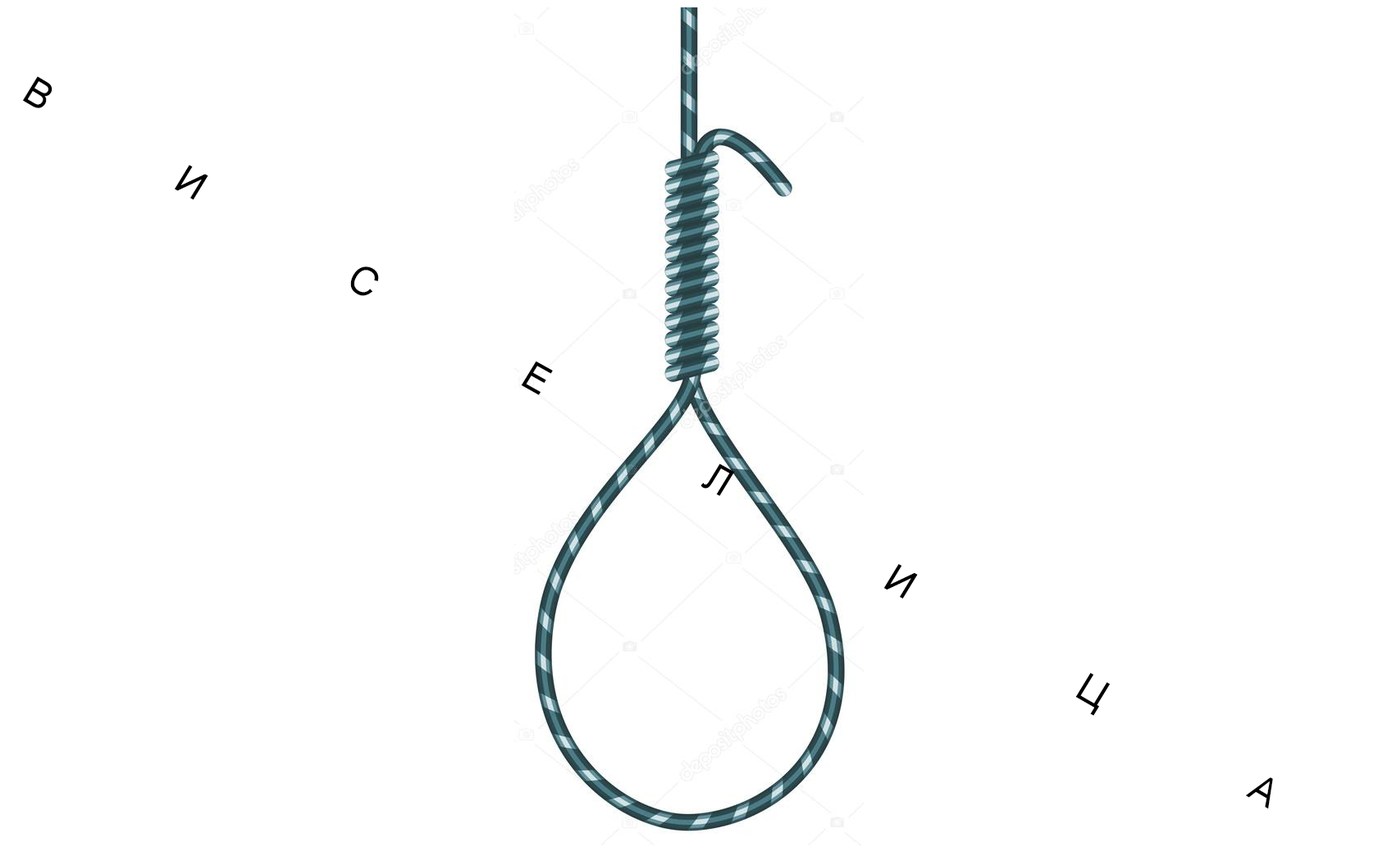
<style>
.page{position:relative;width:1378px;height:865px;background:#ffffff}
.page>*{position:absolute;margin:0}
.t1{font:38.6px "ArialMT";color:#000000}
</style>
<div class="page">
<p class="t1" style="left:23px;top:76px;width:1250px;height:734px;rotate:31deg">В              И                С                Е                 Л                 И                  Ц                А</p>
</div>
